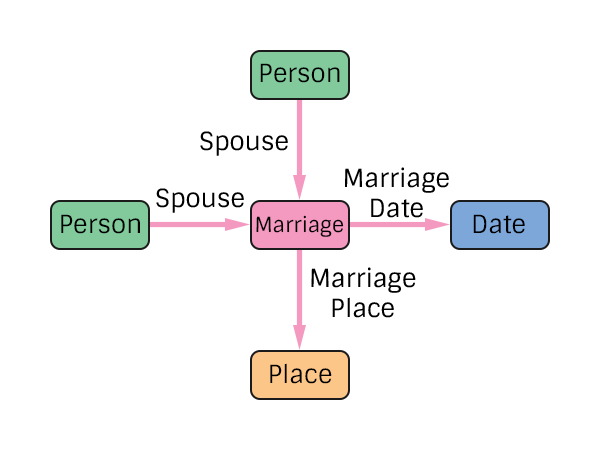
<style>
.page{position:relative;width:600px;height:450px;background:#ffffff}
.page>*{position:absolute;margin:0}
.t1{font:25px "Sintony";color:#000000}
.t2{font:20.8px "Sintony";color:#000000}
</style>
<div class="page">
<p class="t1" style="left:260px;top:63px;width:80px;height:20px">Person</p>
<p class="t1" style="left:200px;top:131px;width:88px;height:25px">Spouse</p>
<p class="t1" style="left:345px;top:167px;width:104px;height:51px;text-align:center">Marriage<br>Date</p>
<p class="t1" style="left:156px;top:188px;width:88px;height:25px">Spouse</p>
<p class="t1" style="left:61px;top:214px;width:79px;height:20px">Person</p>
<p class="t2" style="left:256px;top:215px;width:88px;height:22px">Marriage</p>
<p class="t1" style="left:473px;top:214px;width:52px;height:20px">Date</p>
<p class="t1" style="left:311px;top:267px;width:105px;height:51px;text-align:center">Marriage<br>Place</p>
<p class="t1" style="left:270px;top:363px;width:62px;height:21px">Place</p>
</div>
